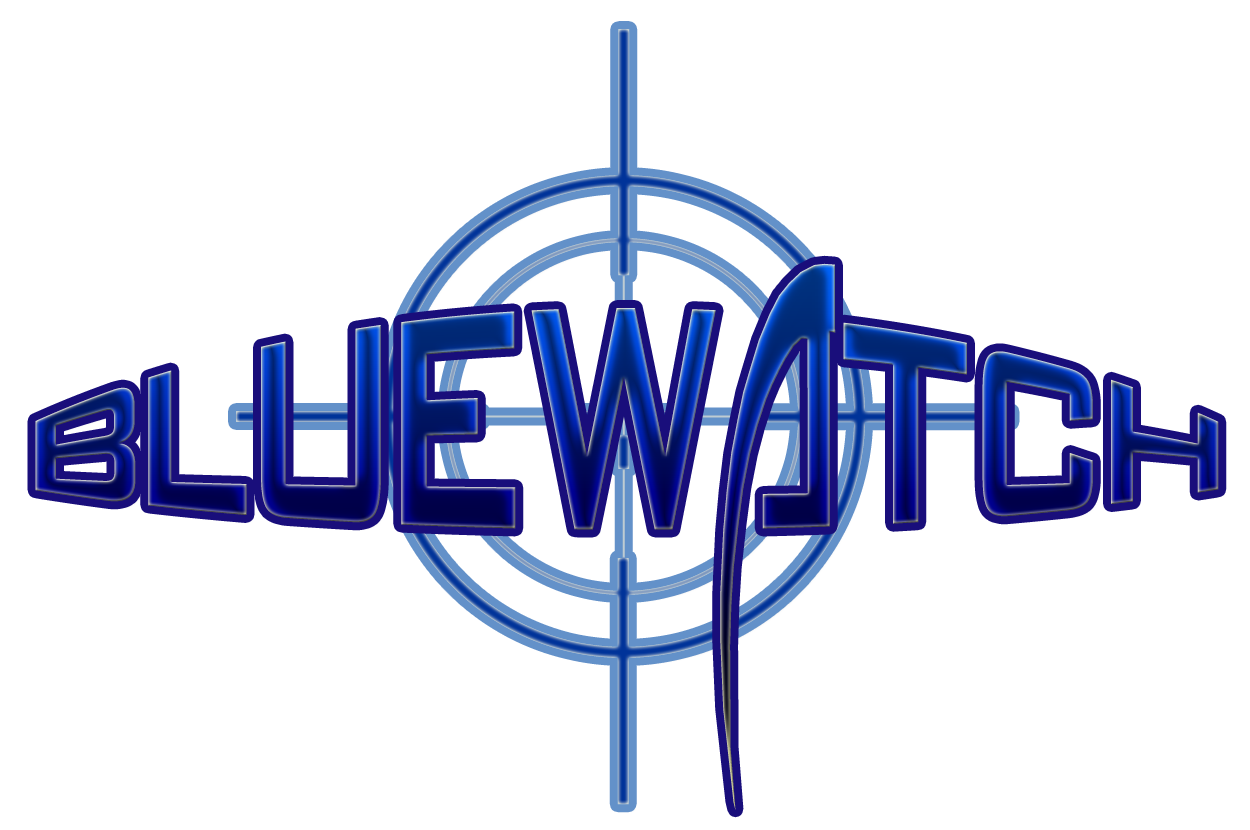
<style>
.page{position:relative;width:1250px;height:830px;background:#ffffff}
.page>*{position:absolute;margin:0}
.t1{font:200px "Backslash";letter-spacing:-0.05em}
</style>
<div class="page">
<p class="t1" style="left:35px;top:263px;width:1184px;height:547px">BLUEWATCH</p>
</div>
